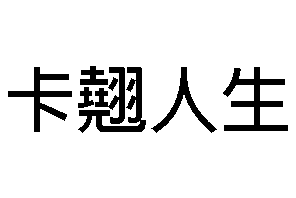
<style>
.page{position:relative;width:296px;height:198px;background:#ffffff}
.page>*{position:absolute;margin:0}
.t1{font:72px "AdobeFanHeitiStd-Bold";color:#000000}
</style>
<div class="page">
<p class="t1" style="left:8px;top:66px;width:280px;height:67px">卡翹人生</p>
</div>
